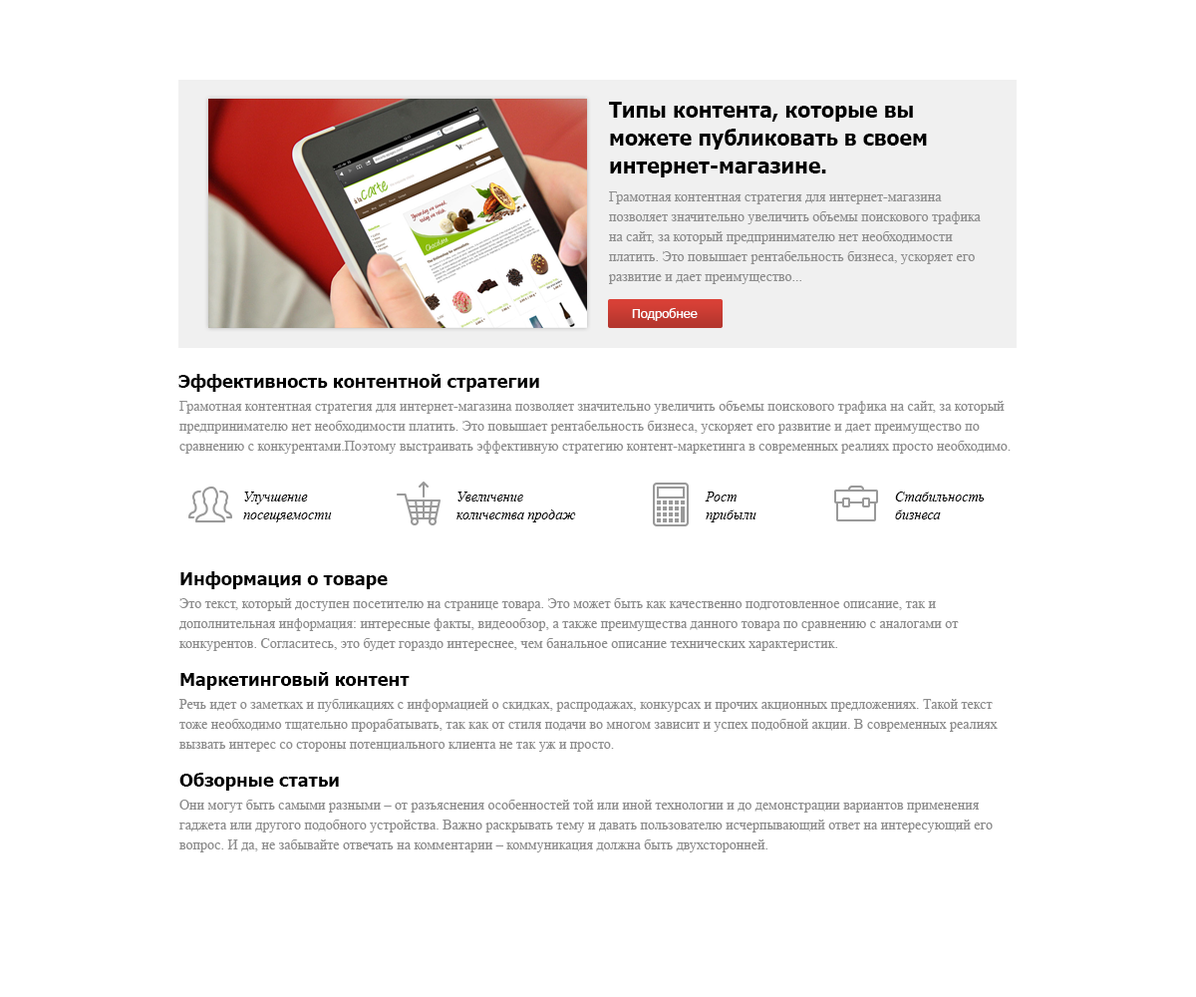
<style>
.page{position:relative;width:1196px;height:997px;background:#ffffff}
.page>*{position:absolute;margin:0}
.t1{font:20.9px/27.9px "Tahoma-Bold";color:#000000}
.t2{font:14px/19.9px "TimesNewRomanPSMT";color:#8d8d8d}
.t3{font:13px "Tahoma";color:#fefefe}
.t4{font:17.9px "Tahoma-Bold";color:#000000}
.t5{font:14px/17.9px "TimesNewRomanPS-ItalicMT";color:#000000}
.t6{font:14px/19.9px "TimesNewRomanPSMT";color:#8c8c8c}
.t7{font:17.9px/18.9px "Tahoma-Bold";color:#000000}
</style>
<div class="page">
<p class="t1" style="left:609px;top:102px;width:318px;height:75px">Типы контента, которые вы можете публиковать в своем интернет-магазине.</p>
<p class="t2" style="left:609px;top:191px;width:372px;height:93px">Грамотная контентная стратегия для интернет-магазина позволяет значительно увеличить объемы поискового трафика на сайт, за который предпринимателю нет необходимости платить. Это повышает рентабельность бизнеса, ускоряет его развитие и дает преимущество...</p>
<p class="t3" style="left:632px;top:308px;width:66px;height:13px">Подробнее</p>
<p class="t4" style="left:178px;top:374px;width:361px;height:18px">Эффективность контентной стратегии</p>
<p class="t2" style="left:179px;top:401px;width:832px;height:53px">Грамотная контентная стратегия для интернет-магазина позволяет значительно увеличить объемы поискового трафика на сайт, за который предпринимателю нет необходимости платить. Это повышает рентабельность бизнеса, ускоряет его развитие и дает преимущество по сравнению с конкурентами.Поэтому выстраивать эффективную стратегию контент-маркетинга в современных реалиях просто необходимо.</p>
<p class="t5" style="left:243px;top:491px;width:89px;height:31px">Улучшение<br>посещяемости</p>
<p class="t5" style="left:457px;top:491px;width:119px;height:31px">Увеличение количества продаж</p>
<p class="t5" style="left:705px;top:491px;width:52px;height:31px">Рост<br>прибыли</p>
<p class="t5" style="left:895px;top:491px;width:90px;height:28px">Стабильность бизнеса</p>
<p class="t6" style="left:179px;top:571px;width:819px;height:281px"><span class="t7">Информация о товаре<br><br></span>Это текст, который доступен посетителю на странице товара. Это может быть как качественно подготовленное описание, так и дополнительная информация: интересные факты, видеообзор, а также преимущества данного товара по сравнению с аналогами от конкурентов. Согласитесь, это будет гораздо интереснее, чем банальное описание технических характеристик.<br><br><span class="t7">Маркетинговый контент<br><br></span>Речь идет о заметках и публикациях с информацией о скидках, распродажах, конкурсах и прочих акционных предложениях. Такой текст тоже необходимо тщательно прорабатывать, так как от стиля подачи во многом зависит и успех подобной акции. В современных реалиях вызвать интерес со стороны потенциального клиента не так уж и просто.<br><br><span class="t7">Обзорные статьи<br><br></span>Они могут быть самыми разными – от разъяснения особенностей той или иной технологии и до демонстрации вариантов применения гаджета или другого подобного устройства. Важно раскрывать тему и давать пользователю исчерпывающий ответ на интересующий его вопрос. И да, не забывайте отвечать на комментарии – коммуникация должна быть двухсторонней.</p>
</div>
